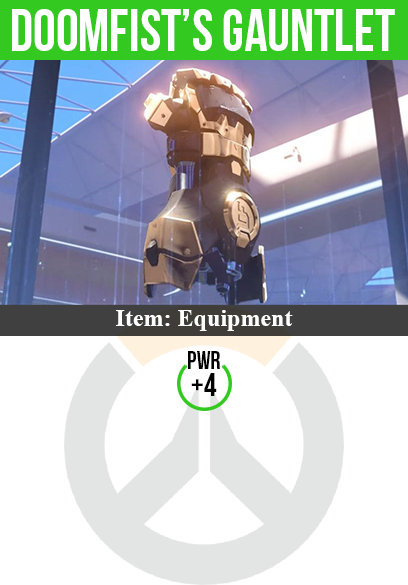
<style>
.page{position:relative;width:408px;height:585px;background:#ffffff}
.page>*{position:absolute;margin:0}
.t1{font:60px "BebasNeue";color:#ffffff;scale:0.95 1}
.t2{font:24px "TimesNewRomanPS-BoldMT";color:#ffffff}
.t3{font:25px "BebasNeue";color:#000000}
.t4{font:32px "BebasNeue";color:#000000}
</style>
<div class="page">
<p class="t1" style="left:12px;top:9px;width:383px;height:42px">doomfist’s gauntlet</p>
<p class="t2" style="left:116px;top:310px;width:177px;height:21px">Item: Equipment</p>
<p class="t3" style="left:188px;top:351px;width:32px;height:18px">pwr</p>
<p class="t4" style="left:191px;top:373px;width:26px;height:23px">+4</p>
</div>
